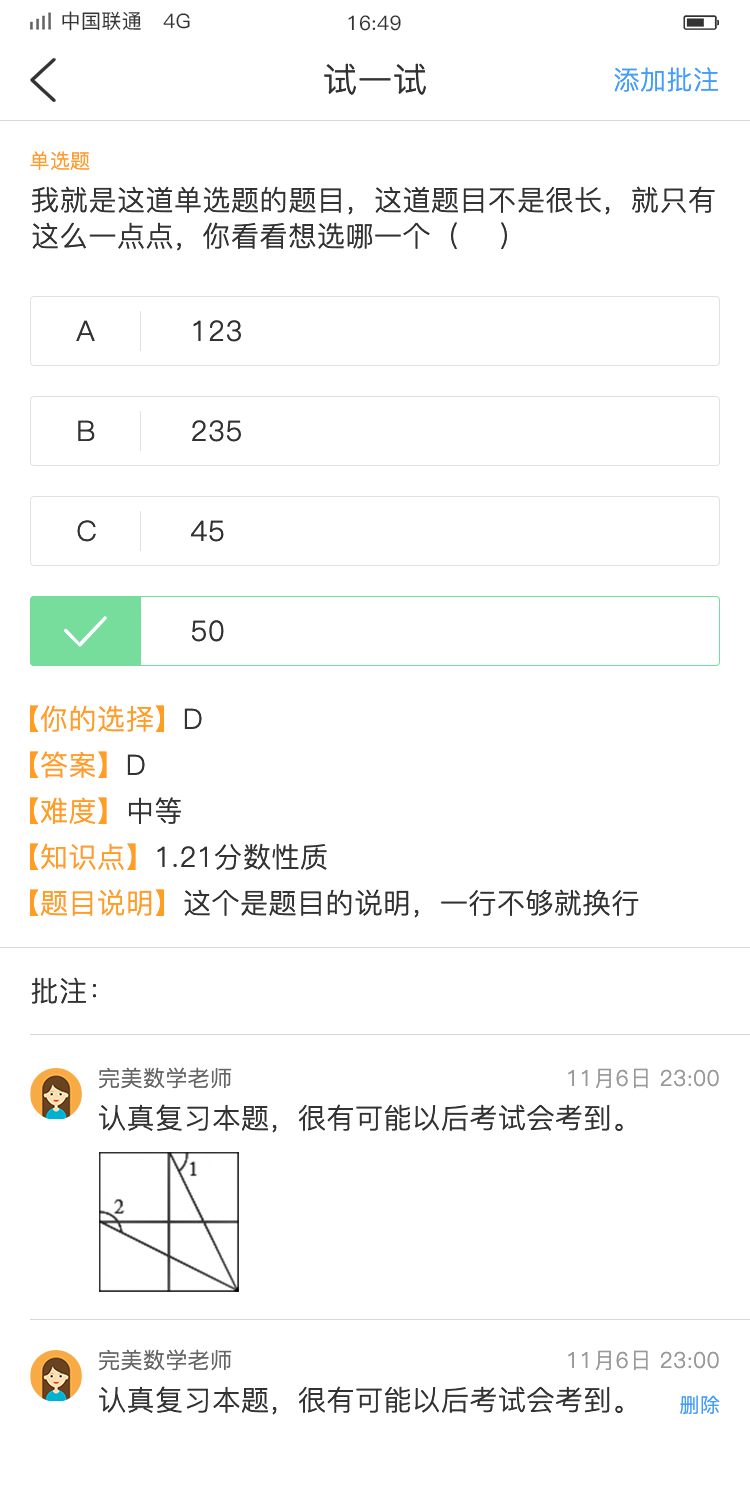
<style>
.page{position:relative;width:750px;height:1500px;background:#ffffff}
.page>*{position:absolute;margin:0}
.t1{font:20px "PingFang-SC-Medium";letter-spacing:0.02em;color:#333333}
.t2{font:34px "PingFang-SC-Regular";letter-spacing:0.02em;color:#333333}
.t3{font:26px "PingFang-SC-Regular";letter-spacing:0.02em;color:#409eff}
.t4{font:20px "PingFang-SC-Regular";letter-spacing:0.02em;color:#ff9e21}
.t5{font:28px/36px "PingFang-SC-Regular";letter-spacing:0.02em;color:#333333}
.t6{font:28px "PingFang-SC-Regular";letter-spacing:0.02em;color:#333333}
.t7{font:28px "PingFang-SC-Regular";letter-spacing:0.02em;color:#ff9e21}
.t8{font:22px "PingFang-SC-Regular";letter-spacing:0.02em;color:#666666}
.t9{font:22px "PingFang-SC-Regular";letter-spacing:0.02em;color:#999999}
.t10{font:20px "PingFang-SC-Regular";letter-spacing:0.02em;color:#409eff}
</style>
<div class="page">
<p class="t1" style="left:62px;top:11px;width:128px;height:20px">中国联通   4G</p>
<p class="t1" style="left:348px;top:15px;width:53px;height:16px">16:49</p>
<p class="t2" style="left:324px;top:63px;width:102px;height:32px">试一试</p>
<p class="t3" style="left:614px;top:67px;width:104px;height:25px">添加批注</p>
<p class="t4" style="left:30px;top:151px;width:60px;height:19px">单选题</p>
<p class="t5" style="left:32px;top:186px;width:683px;height:65px">我就是这道单选题的题目，这道题目不是很长，就只有这么一点点，你看看想选哪一个（    ）</p>
<p class="t6" style="left:76px;top:320px;width:19px;height:21px">A</p>
<p class="t6" style="left:193px;top:320px;width:48px;height:22px">123</p>
<p class="t6" style="left:78px;top:420px;width:17px;height:21px">B</p>
<p class="t6" style="left:192px;top:420px;width:49px;height:22px">235</p>
<p class="t6" style="left:77px;top:520px;width:19px;height:22px">C</p>
<p class="t6" style="left:191px;top:520px;width:33px;height:22px">45</p>
<p class="t6" style="left:192px;top:620px;width:32px;height:22px">50</p>
<p class="t7" style="left:30px;top:705px;width:172px;height:27px">【你的选择】<span class="t6">D</span></p>
<p class="t7" style="left:30px;top:751px;width:115px;height:27px">【答案】<span class="t6">D</span></p>
<p class="t7" style="left:30px;top:797px;width:151px;height:27px">【难度】<span class="t6">中等</span></p>
<p class="t6" style="left:30px;top:843px;width:297px;height:27px"><span class="t7">【知识点】</span>1.21分数性质</p>
<p class="t6" style="left:30px;top:889px;width:609px;height:29px"><span class="t7">【题目说明】</span>这个是题目的说明，一行不够就换行</p>
<p class="t6" style="left:31px;top:977px;width:66px;height:27px">批注：</p>
<p class="t8" style="left:99px;top:1067px;width:133px;height:22px">完美数学老师</p>
<p class="t9" style="left:568px;top:1068px;width:151px;height:21px">11月6日 23:00</p>
<p class="t6" style="left:99px;top:1104px;width:524px;height:29px">认真复习本题，很有可能以后考试会考到。</p>
<p class="t8" style="left:99px;top:1349px;width:133px;height:22px">完美数学老师</p>
<p class="t9" style="left:568px;top:1350px;width:151px;height:21px">11月6日 23:00</p>
<p class="t6" style="left:99px;top:1386px;width:524px;height:29px">认真复习本题，很有可能以后考试会考到。</p>
<p class="t10" style="left:680px;top:1395px;width:40px;height:19px">删除</p>
</div>
